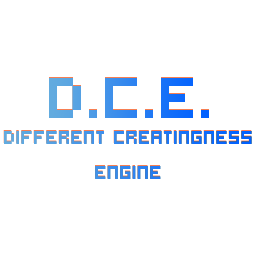
<style>
.page{position:relative;width:256px;height:256px;background:#ffffff}
.page>*{position:absolute;margin:0}
.t1{font:64px "Hooge0555"}
.t2{font:20px "Hooge0555"}
</style>
<div class="page">
<p class="t1" style="left:49px;top:77px;width:160px;height:40px">D.C.E.</p>
<p class="t2" style="left:3px;top:130px;width:249px;height:48px;text-align:center">Different Creatingness<br>Engine</p>
</div>
